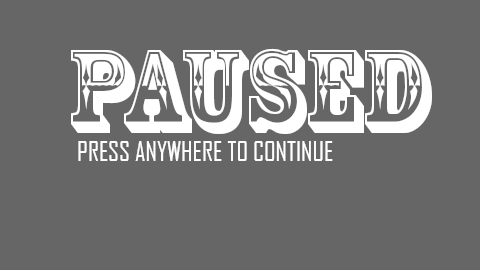
<style>
.page{position:relative;width:480px;height:270px;background:#666666}
.page>*{position:absolute;margin:0}
.t1{font:111px "RosewoodStd-Regular";color:#ffffff}
.t2{font:26px "AgencyFB-Reg";color:#ffffff}
</style>
<div class="page">
<p class="t1" style="left:71px;top:48px;width:361px;height:86px">PAUSED</p>
<p class="t2" style="left:78px;top:141px;width:255px;height:20px">PRESS ANYWHERE TO CONTINUE</p>
</div>
